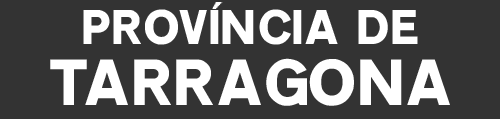
<style>
.page{position:relative;width:500px;height:119px;background:#333333}
.page>*{position:absolute;margin:0}
.t1{font:48px/30.7px "Ccrige-Regular";color:#ffffff}
.t2{font:64px/30.7px "Ccrige-Regular";color:#ffffff}
</style>
<div class="page">
<p class="t1" style="left:50px;top:9px;width:400px;height:97px;text-align:center">PROVINCIA DE<br>                      <br><span class="t2">TARRAGONA</span></p>
</div>
